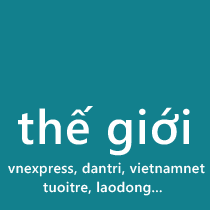
<style>
.page{position:relative;width:210px;height:210px;background:#12808d}
.page>*{position:absolute;margin:0}
.t1{font:48px "SegoeWP-Semibold";letter-spacing:0.025em;color:#ffffff}
.t2{font:14px "SegoeWP-Semibold";letter-spacing:0.025em;color:#fefefe}
.t3{font:14px "SegoeWP-Semibold";letter-spacing:0.025em;color:#ffffff}
</style>
<div class="page">
<p class="t1" style="left:18px;top:106px;width:172px;height:50px">thế giới</p>
<p class="t2" style="left:8px;top:162px;width:197px;height:15px">vnexpress, dantri, vietnamnet</p>
<p class="t3" style="left:43px;top:181px;width:119px;height:15px">tuoitre, laodong...</p>
</div>
